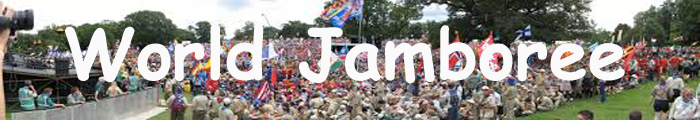
<style>
.page{position:relative;width:700px;height:120px}
.page>*{position:absolute;margin:0}
.t1{font:70px "ComicSansMS-Bold";color:#fafafa}
</style>
<div class="page">
<p class="t1" style="left:65px;top:24px;width:560px;height:60px">World Jamboree Photos</p>
</div>
